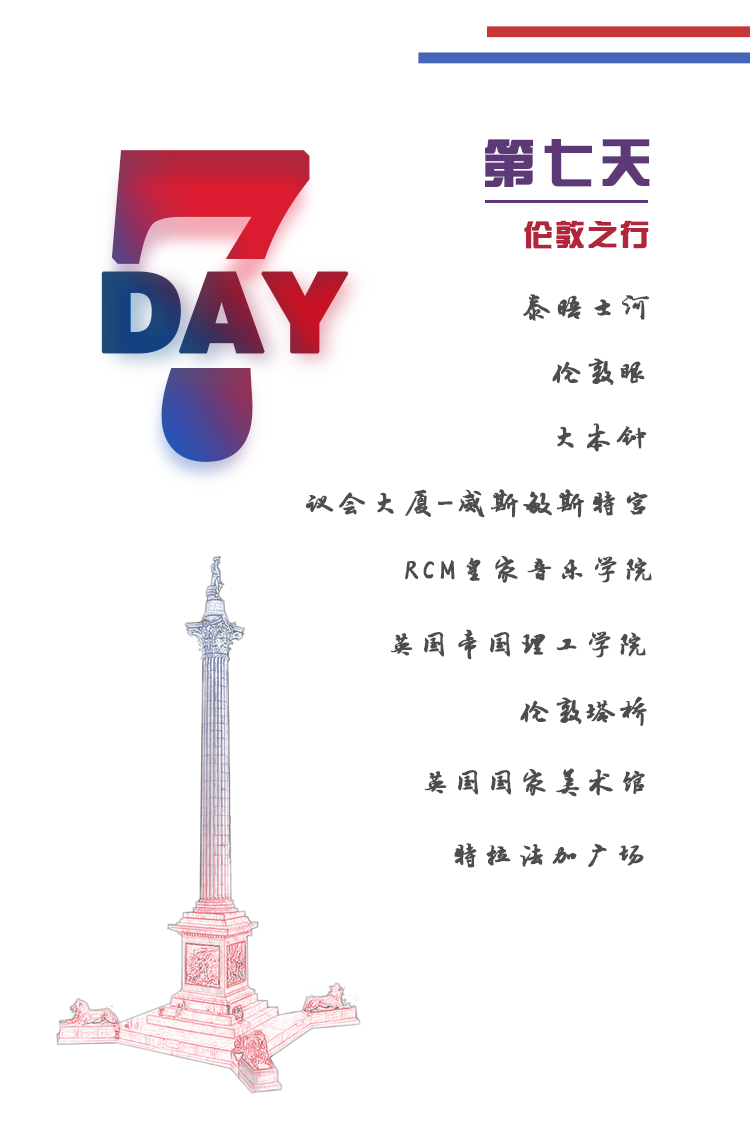
<style>
.page{position:relative;width:750px;height:1140px;background:#ffffff}
.page>*{position:absolute;margin:0}
.t1{font:432.9px "News706BT-BoldC";letter-spacing:-0.05em;font-weight:bold}
.t2{font:52px "FZZYJW--GB1-0";letter-spacing:0.1em;color:#5d3a77;font-weight:bold}
.t3{font:30px "FZZYJW--GB1-0";letter-spacing:0.05em;color:#b3253a;font-weight:bold}
.t4{font:110px "FZCCHJW--GB1-0";letter-spacing:-0.05em;font-weight:bold}
.t5{font:30px "·½ÕýÂÀ½¨µÂ×ÖÌå";letter-spacing:0.075em;color:#4d4d4d;font-weight:bold}
</style>
<div class="page">
<p class="t1" style="left:111px;top:150px;width:199px;height:312px">7</p>
<p class="t2" style="left:485px;top:139px;width:165px;height:48px">第七天</p>
<p class="t3" style="left:524px;top:220px;width:125px;height:29px">伦敦之行</p>
<p class="t4" style="left:101px;top:271px;width:248px;height:83px">DAY</p>
<p class="t5" style="left:523px;top:294px;width:126px;height:27px">泰晤士河</p>
<p class="t5" style="left:552px;top:358px;width:93px;height:27px">伦敦眼</p>
<p class="t5" style="left:557px;top:423px;width:90px;height:29px">大本钟</p>
<p class="t5" style="left:305px;top:489px;width:343px;height:29px">议会大厦-威斯敏斯特宫</p>
<p class="t5" style="left:405px;top:556px;width:247px;height:27px">RCM皇家音乐学院</p>
<p class="t5" style="left:390px;top:629px;width:256px;height:31px">英国帝国理工学院</p>
<p class="t5" style="left:520px;top:696px;width:127px;height:30px">伦敦塔桥</p>
<p class="t5" style="left:424px;top:768px;width:221px;height:29px">英国国家美术馆</p>
<p class="t5" style="left:454px;top:843px;width:190px;height:25px">特拉法加广场</p>
</div>
